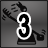
<style>
.page{position:relative;width:48px;height:48px}
.page>*{position:absolute;margin:0}
.t1{font:31.5px "ArialRoundedMTBold";letter-spacing:0.12em;color:#000000;font-weight:bold;scale:0.67 1}
</style>
<div class="page">
<p class="t1" style="left:18px;top:13px;width:12px;height:25px">3</p>
</div>
